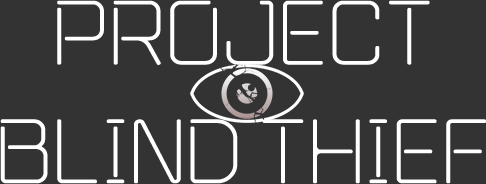
<style>
.page{position:relative;width:486px;height:184px;background:#333333}
.page>*{position:absolute;margin:0}
.t1{font:98.9px "243GroundAL";color:#ffffff;scale:1.06 1}
</style>
<div class="page">
<p class="t1" style="left:0px;top:0px;width:486px;height:184px;text-align:center">PROJECT<br>BLIND THIEF</p>
</div>
